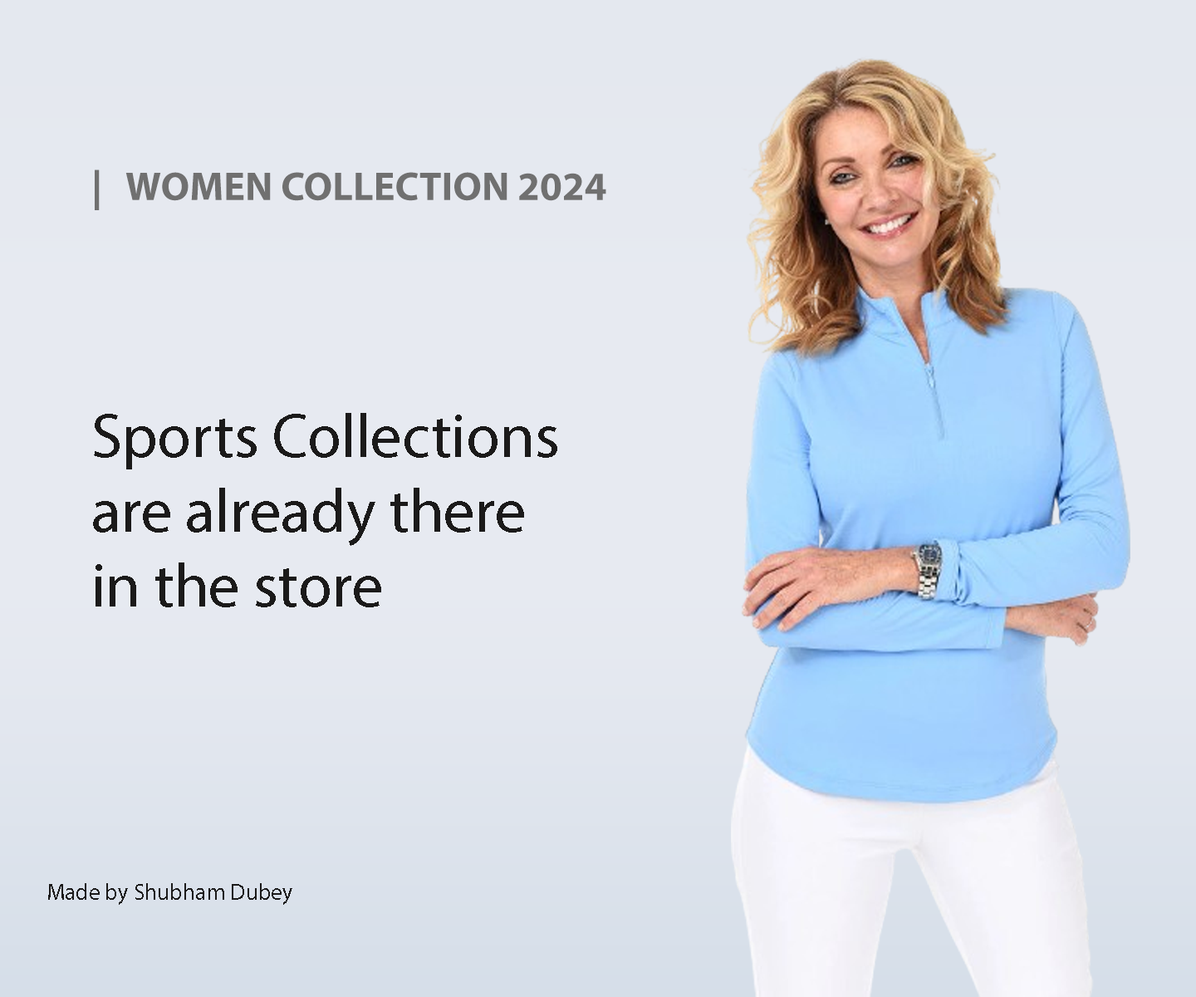
<style>
.page{position:relative;width:1196px;height:997px;background:#e7eaf1}
.page>*{position:absolute;margin:0}
.t1{font:40.2px "MyriadPro-Bold";color:#707070}
.t2{font:62.3px "MyriadPro-Regular";color:#1b1a1a}
.t3{font:22.9px "MyriadPro-Regular";color:#1b1a1a}
</style>
<div class="page">
<p class="t1" style="left:95px;top:169px;width:511px;height:41px">|   WOMEN COLLECTION 2024</p>
<p class="t2" style="left:93px;top:413px;width:464px;height:194px">Sports Collections are already there in the store</p>
<p class="t3" style="left:48px;top:883px;width:244px;height:22px">Made by Shubham Dubey</p>
</div>
